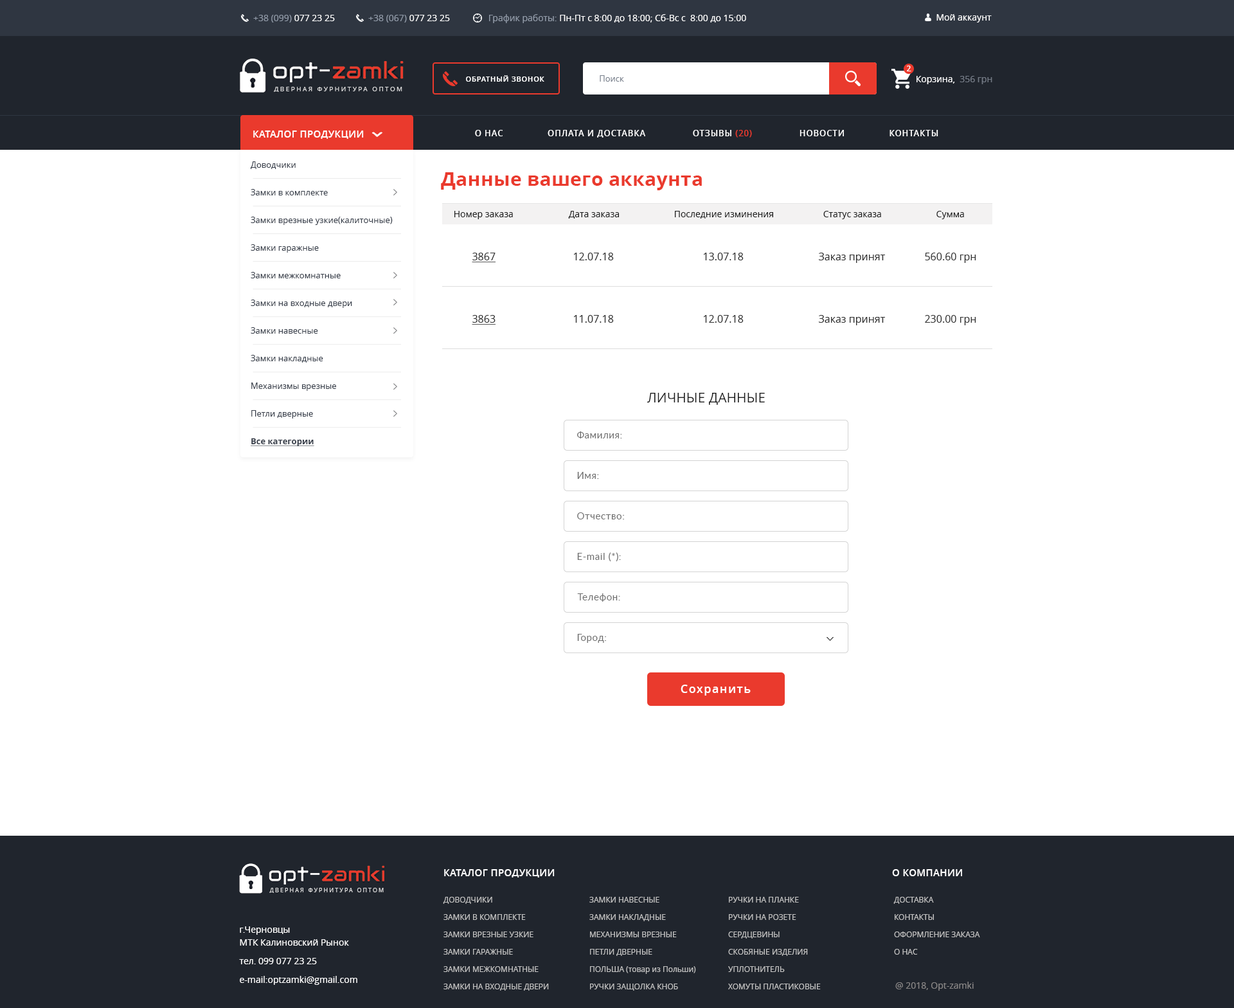
<style>
.page{position:relative;width:1234px;height:1008px;background:#ffffff}
.page>*{position:absolute;margin:0}
.t1{font:9px "OpenSans";color:#9099a7}
.t2{font:9px "OpenSans";color:#ffffff}
.t3{font:7.7px "OpenSans-Semibold";color:#ffffff}
.t4{font:7.1px "OpenSans-Semibold";letter-spacing:0.075em;color:#ffffff;text-transform:uppercase}
.t5{font:8.4px "OpenSans";color:#79818d}
.t6{font:9px "OpenSans";color:#747b86}
.t7{font:6.4px "OpenSans";letter-spacing:0.26em;color:#dfdfe0;text-transform:uppercase}
.t8{font:9.6px "OpenSans-Semibold";letter-spacing:0.025em;color:#ffffff;text-transform:uppercase}
.t9{font:8.4px "OpenSans-Semibold";letter-spacing:0.07em;color:#ffffff;text-transform:uppercase}
.t10{font:8.4px "OpenSans-Semibold";letter-spacing:0.07em;color:#ea3a2d;text-transform:uppercase}
.t11{font:8.4px/27.7px "OpenSans";color:#373e4a}
.t12{font:8.4px/27.7px "OpenSans-Bold";color:#373e4a;text-decoration:underline}
.t13{font:19.3px "OpenSans-Bold";letter-spacing:0.01em;color:#ea3a2d}
.t14{font:9px "OpenSans";color:#1c1c1c}
.t15{font:10.3px "OpenSans";color:#303030;text-decoration:underline}
.t16{font:10.3px "OpenSans";color:#303030}
.t17{font:13.5px "OpenSans";color:#1c1c1c;text-transform:uppercase}
.t18{font:9.6px "Lato-Regular";letter-spacing:0.04em;color:#6f6f6f}
.t19{font:11.6px "OpenSans-Semibold";letter-spacing:0.075em;color:#ffffff}
.t20{font:5.6px "OpenSans";letter-spacing:0.26em;color:#dfdfe0;text-transform:uppercase}
.t21{font:7.7px/17.4px "OpenSans";color:#c2c2c2}
.t22{font:7.7px/17.4px "OpenSans";color:#c2c2c2;text-transform:uppercase}
.t23{font:9px/18.6px "OpenSans";color:#ffffff}
.t24{font:9px/10.9px "OpenSans";color:#ffffff}
.t25{font:9px/12.9px "OpenSans";color:#ffffff}
.t26{font:9px "OpenSans";color:#888686}
</style>
<div class="page">
<p class="t1" style="left:253px;top:15px;width:82px;height:7px">+38 (099)<span class="t2"> 077 23 25</span></p>
<p class="t1" style="left:368px;top:15px;width:82px;height:7px">+38 (067)<span class="t2"> 077 23 25</span></p>
<p class="t2" style="left:489px;top:14px;width:257px;height:9px"><span class="t1">График работы: </span>Пн-Пт с 8:00 до 18:00; Сб-Вс с  8:00 до 15:00</p>
<p class="t2" style="left:937px;top:14px;width:55px;height:8px">Мой аккаунт</p>
<p class="t3" style="left:907px;top:66px;width:5px;height:5px">2</p>
<p class="t4" style="left:466px;top:75px;width:78px;height:7px">Обратный звонок</p>
<p class="t5" style="left:600px;top:75px;width:24px;height:7px">Поиск</p>
<p class="t2" style="left:917px;top:76px;width:76px;height:8px">Корзина,  <span class="t6">356 грн</span></p>
<p class="t7" style="left:274px;top:87px;width:128px;height:5px">Дверная фурнитура оптом</p>
<p class="t8" style="left:253px;top:130px;width:111px;height:9px">каталог продукции</p>
<p class="t9" style="left:475px;top:130px;width:464px;height:8px">о нас                оплата и доставка                 Отзывы <span class="t10">(20) </span>                НОВОСТИ                Контакты</p>
<p class="t11" style="left:250px;top:161px;width:143px;height:286px">Доводчики<br>Замки в комплекте<br>Замки врезные узкие(калиточные)<br>Замки гаражные<br>Замки межкомнатные<br>Замки на входные двери<br>Замки навесные<br>Замки накладные<br>Механизмы врезные<br>Петли дверные<br><span class="t12">Все категории<br></span>Ручки защолка кноб<br>Ручки на планке<br>Ручки на розете<br>Сердцевины<br>Скобяные изделия<br>Уплотнитель<br>Хомуты пластиковые<br>Шпингалеты и дверные аксессуары</p>
<p class="t13" style="left:441px;top:172px;width:261px;height:18px">Данные вашего аккаунта</p>
<p class="t14" style="left:454px;top:211px;width:59px;height:8px">Номер заказа</p>
<p class="t14" style="left:568px;top:211px;width:51px;height:8px">Дата заказа</p>
<p class="t14" style="left:675px;top:211px;width:98px;height:8px">Последние изминения</p>
<p class="t14" style="left:823px;top:211px;width:58px;height:8px">Статус заказа</p>
<p class="t14" style="left:937px;top:211px;width:27px;height:8px">Сумма</p>
<p class="t15" style="left:472px;top:253px;width:24px;height:9px">3867</p>
<p class="t16" style="left:574px;top:253px;width:40px;height:7px">12.07.18</p>
<p class="t16" style="left:704px;top:253px;width:40px;height:7px">13.07.18</p>
<p class="t16" style="left:818px;top:253px;width:67px;height:10px">Заказ принят</p>
<p class="t16" style="left:925px;top:253px;width:51px;height:10px">560.60 грн</p>
<p class="t15" style="left:472px;top:315px;width:24px;height:10px">3863</p>
<p class="t16" style="left:574px;top:315px;width:40px;height:8px">11.07.18</p>
<p class="t16" style="left:704px;top:315px;width:40px;height:8px">12.07.18</p>
<p class="t16" style="left:818px;top:315px;width:67px;height:10px">Заказ принят</p>
<p class="t16" style="left:925px;top:315px;width:51px;height:10px">230.00 грн</p>
<p class="t17" style="left:647px;top:393px;width:118px;height:12px">личные данные</p>
<p class="t18" style="left:577px;top:431px;width:45px;height:7px">Фамилия:</p>
<p class="t18" style="left:577px;top:472px;width:22px;height:7px">Имя:</p>
<p class="t18" style="left:577px;top:512px;width:47px;height:7px">Отчество:</p>
<p class="t18" style="left:577px;top:552px;width:44px;height:10px">E-mail (*):</p>
<p class="t18" style="left:577px;top:593px;width:43px;height:9px">Телефон:</p>
<p class="t18" style="left:577px;top:634px;width:29px;height:9px">Город:</p>
<p class="t19" style="left:681px;top:685px;width:70px;height:11px">Сохранить</p>
<p class="t8" style="left:444px;top:869px;width:111px;height:8px">каталог продукции</p>
<p class="t8" style="left:892px;top:869px;width:70px;height:7px">о компании</p>
<p class="t20" style="left:269px;top:888px;width:115px;height:5px">Дверная фурнитура оптом</p>
<p class="t21" style="left:443px;top:897px;width:106px;height:94px">ДОВОДЧИКИ<br>ЗАМКИ В КОМПЛЕКТЕ<br>ЗАМКИ ВРЕЗНЫЕ УЗКИЕ<br>ЗАМКИ ГАРАЖНЫЕ<br>ЗАМКИ МЕЖКОМНАТНЫЕ<br>ЗАМКИ НА ВХОДНЫЕ ДВЕРИ</p>
<p class="t21" style="left:589px;top:897px;width:107px;height:94px">ЗАМКИ НАВЕСНЫЕ<br>ЗАМКИ НАКЛАДНЫЕ<br>МЕХАНИЗМЫ ВРЕЗНЫЕ<br>ПЕТЛИ ДВЕРНЫЕ<br>ПОЛЬША (товар из Польши)<br>РУЧКИ ЗАЩОЛКА КНОБ</p>
<p class="t21" style="left:728px;top:897px;width:93px;height:92px">РУЧКИ НА ПЛАНКЕ<br>РУЧКИ НА РОЗЕТЕ<br>СЕРДЦЕВИНЫ<br>СКОБЯНЫЕ ИЗДЕЛИЯ<br>УПЛОТНИТЕЛЬ<br>ХОМУТЫ ПЛАСТИКОВЫЕ</p>
<p class="t22" style="left:894px;top:897px;width:86px;height:58px">Доставка<br>Контакты <br>Оформление заказа<br>о нас</p>
<p class="t23" style="left:239px;top:926px;width:118px;height:59px">г.Черн<span class="t24">овцы</span><span class="t25"><br>МТК Калиновский Рынок<br></span>тел. 099 077 23 25<br>e-mail:optzamki@gmail.com</p>
<p class="t26" style="left:895px;top:982px;width:79px;height:9px">@ 2018, Opt-zamki</p>
</div>
